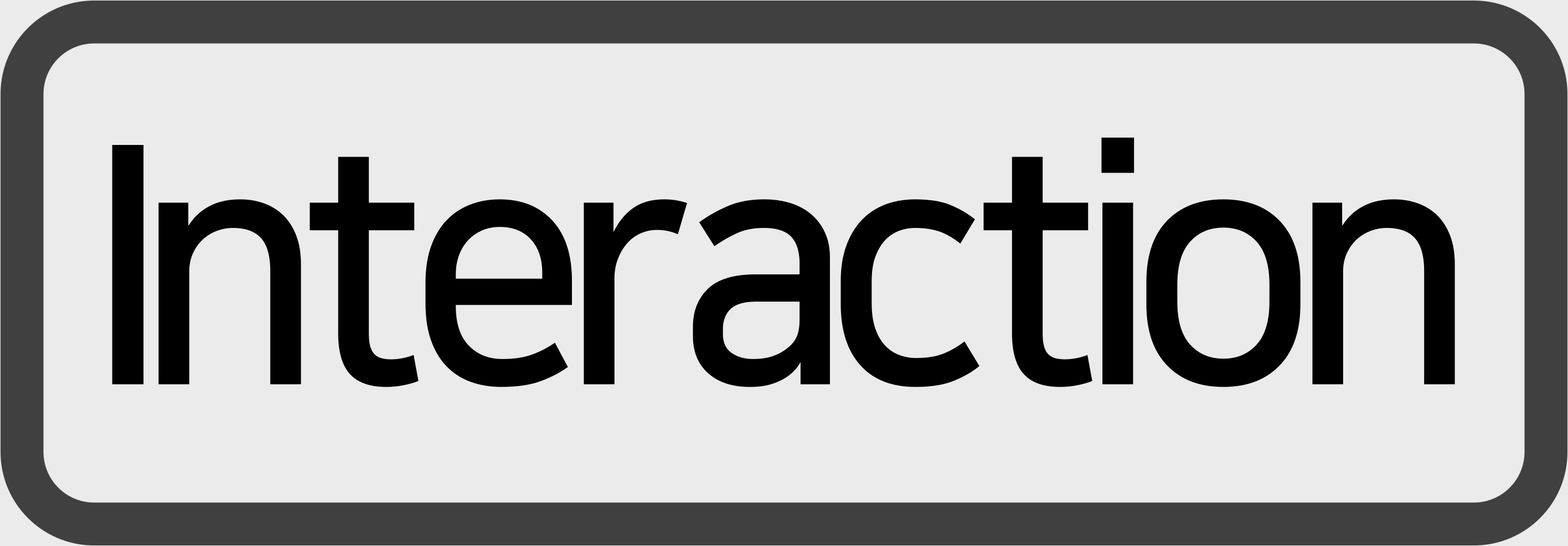
<style>
.page{position:relative;width:1568px;height:546px;background:#ebebeb}
.page>*{position:absolute;margin:0}
.t1{font:332.2px "NanumSquare_acB";color:#000000;scale:0.95 1}
</style>
<div class="page">
<p class="t1" style="left:112px;top:137px;width:1343px;height:251px">Interaction</p>
</div>
